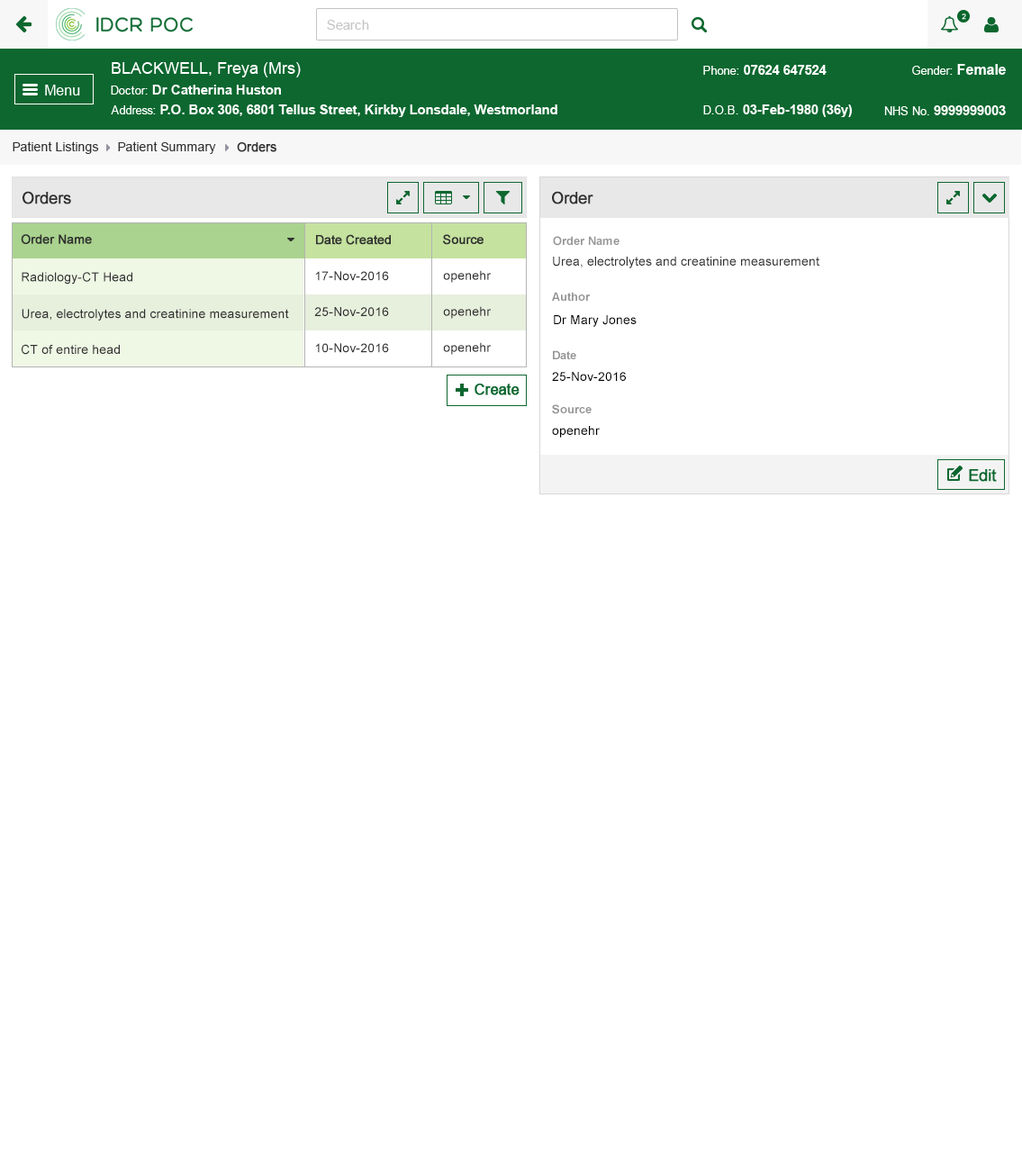
<style>
.page{position:relative;width:1022px;height:1167px;background:#ffffff}
.page>*{position:absolute;margin:0}
.t1{font:12.6px "ArialMT";color:#313131}
.t2{font:12.6px "ArialMT";color:#313131;font-weight:bold}
.t3{font:16.2px "ArialMT";color:#303030;font-weight:bold}
.t4{font:12.6px "ArialMT";color:#303030;font-weight:bold}
.t5{font:11.7px "Arial-BoldMT";color:#959595}
.t6{font:12.6px "ArialMT";color:#303030}
.t7{font:12.6px "ArialMT";color:#000000}
</style>
<div class="page">
<p class="t1" style="left:13px;top:141px;width:86px;height:13px">Patient Listings</p>
<p class="t1" style="left:118px;top:141px;width:98px;height:13px">Patient Summary</p>
<p class="t2" style="left:237px;top:142px;width:39px;height:10px">Orders</p>
<p class="t3" style="left:23px;top:191px;width:48px;height:13px">Orders</p>
<p class="t3" style="left:552px;top:191px;width:41px;height:13px">Order</p>
<p class="t4" style="left:21px;top:234px;width:71px;height:10px">Order Name</p>
<p class="t4" style="left:316px;top:234px;width:75px;height:11px">Date Created</p>
<p class="t4" style="left:443px;top:234px;width:40px;height:11px">Source</p>
<p class="t5" style="left:553px;top:236px;width:66px;height:10px">Order Name</p>
<p class="t6" style="left:553px;top:257px;width:266px;height:11px">Urea, electrolytes and creatinine measurement</p>
<p class="t6" style="left:22px;top:272px;width:110px;height:13px">Radiology-CT Head</p>
<p class="t6" style="left:315px;top:271px;width:74px;height:10px">17-Nov-2016</p>
<p class="t6" style="left:443px;top:270px;width:49px;height:13px">openehr</p>
<p class="t5" style="left:552px;top:292px;width:39px;height:9px">Author</p>
<p class="t6" style="left:22px;top:309px;width:267px;height:12px">Urea, electrolytes and creatinine measurement</p>
<p class="t6" style="left:314px;top:307px;width:75px;height:9px">25-Nov-2016</p>
<p class="t6" style="left:443px;top:306px;width:49px;height:13px">openehr</p>
<p class="t7" style="left:554px;top:315px;width:83px;height:12px">Dr Mary Jones</p>
<p class="t6" style="left:22px;top:344px;width:98px;height:11px">CT of entire head</p>
<p class="t6" style="left:315px;top:343px;width:74px;height:10px">10-Nov-2016</p>
<p class="t6" style="left:443px;top:342px;width:49px;height:13px">openehr</p>
<p class="t5" style="left:553px;top:350px;width:23px;height:9px">Date</p>
<p class="t7" style="left:552px;top:372px;width:74px;height:9px">25-Nov-2016</p>
<p class="t5" style="left:552px;top:404px;width:40px;height:10px">Source</p>
<p class="t7" style="left:552px;top:426px;width:48px;height:12px">openehr</p>
</div>
